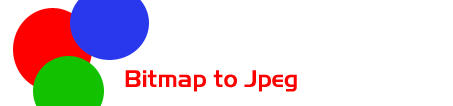
<style>
.page{position:relative;width:453px;height:106px;background:#ffffff}
.page>*{position:absolute;margin:0}
.t1{font:24px "Slicker";color:#ff0000}
</style>
<div class="page">
<p class="t1" style="left:125px;top:70px;width:172px;height:22px">Bitmap to Jpeg</p>
</div>
